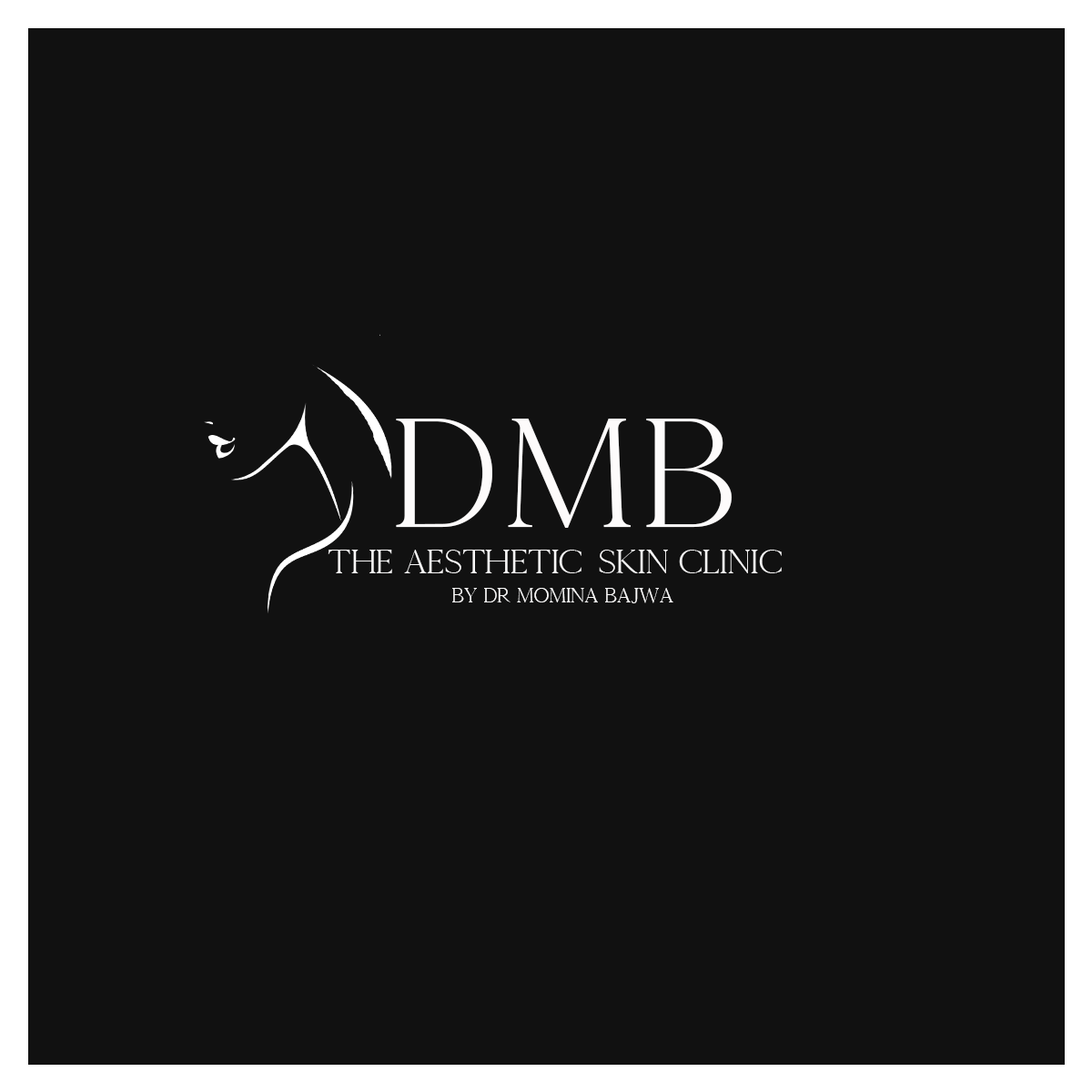
<style>
.page{position:relative;width:1092px;height:1092px;background:#111111}
.page>*{position:absolute;margin:0}
.t1{font:155px "CammronDemo";color:#fdfbfb;text-transform:uppercase}
.t2{font:33.4px "CammronDemo";letter-spacing:-0.04em;color:#f9f8f8;text-transform:uppercase}
.t3{font:20px "CammronDemo";letter-spacing:-0.04em;color:#f9f8f8;text-transform:uppercase}
</style>
<div class="page">
<p class="t1" style="left:396px;top:419px;width:336px;height:109px">DmB</p>
<p class="t2" style="left:328px;top:550px;width:454px;height:23px">The aesthetic  skin clinic</p>
<p class="t3" style="left:452px;top:588px;width:221px;height:15px">by dr momina bajwa</p>
</div>
